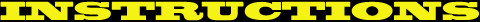
<style>
.page{position:relative;width:480px;height:22px;background:#f5f216}
.page>*{position:absolute;margin:0}
.t1{font:24px "BlackoakStd";color:#f5f216}
</style>
<div class="page">
<p class="t1" style="left:0px;top:1px;width:479px;height:20px">INSTRUCTIONS</p>
</div>
